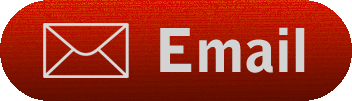
<style>
.page{position:relative;width:352px;height:101px}
.page>*{position:absolute;margin:0}
.t1{font:60px "BellGothicStd-Black";color:#d3d3d3}
</style>
<div class="page">
<p class="t1" style="left:160px;top:27px;width:145px;height:46px">Email</p>
</div>
